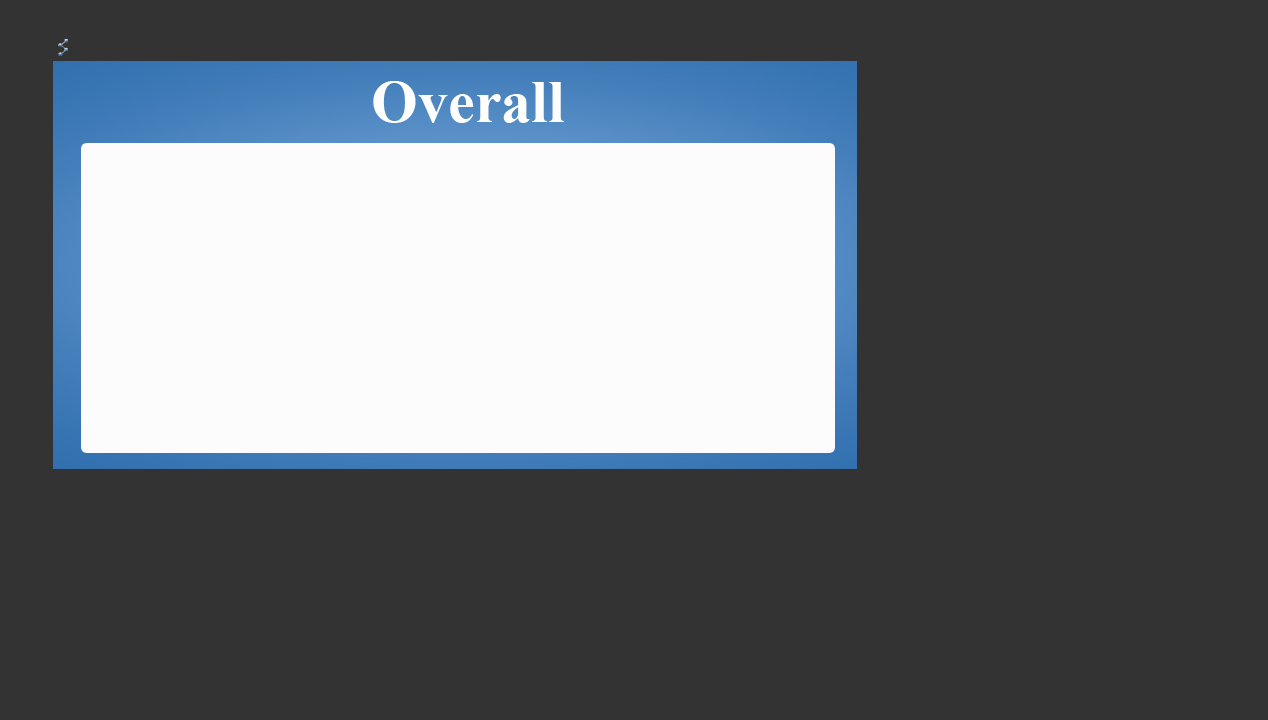
<style>
.page{position:relative;width:1268px;height:720px;background:#333333}
.page>*{position:absolute;margin:0}
.t1{font:60px "TimesNewRomanPS-BoldMT";color:#fefefe}
</style>
<div class="page">
<p class="t1" style="left:373px;top:81px;width:191px;height:42px">Overall</p>
</div>
